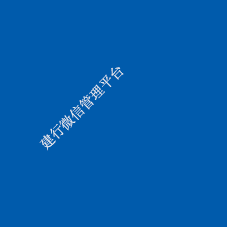
<style>
.page{position:relative;width:227px;height:227px;background:#005bac}
.page>*{position:absolute;margin:0}
.t1{font:14px "SimSun";color:#f1f1f1}
</style>
<div class="page">
<p class="t1" style="left:39px;top:67px;width:85px;height:84px;rotate:-45deg">建行微信管理平台</p>
</div>
